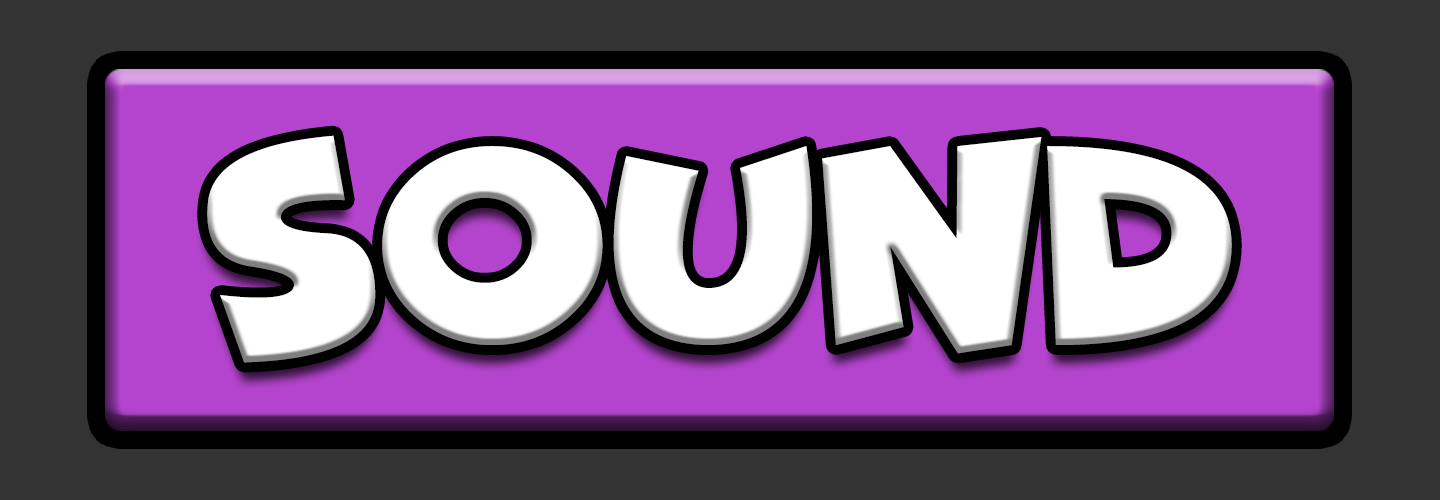
<style>
.page{position:relative;width:1440px;height:500px;background:#333333}
.page>*{position:absolute;margin:0}
.t1{font:290.6px "Funhouse";color:#ffffff;scale:0.95 1}
</style>
<div class="page">
<p class="t1" style="left:207px;top:135px;width:1025px;height:228px">SOUND</p>
</div>
